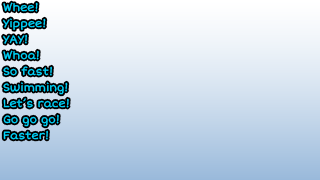
<style>
.page{position:relative;width:320px;height:180px}
.page>*{position:absolute;margin:0}
.t1{font:11px/16px "ShortStack";color:#00d8ff}
</style>
<div class="page">
<p class="t1" style="left:3px;top:2px;width:66px;height:138px">Whee!<br>Yippee!<br>YAY!<br>Whoa!<br>So fast!<br>Swimming!<br>Let’s race!<br>Go go go!<br>Faster!</p>
</div>
